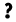
<style>
.page{position:relative;width:16px;height:22px;background:#ffffff}
.page>*{position:absolute;margin:0}
.t1{font:18px "HoboStd";color:#000000;font-weight:bold}
</style>
<div class="page">
<p class="t1" style="left:5px;top:2px;width:8px;height:17px">?</p>
</div>
